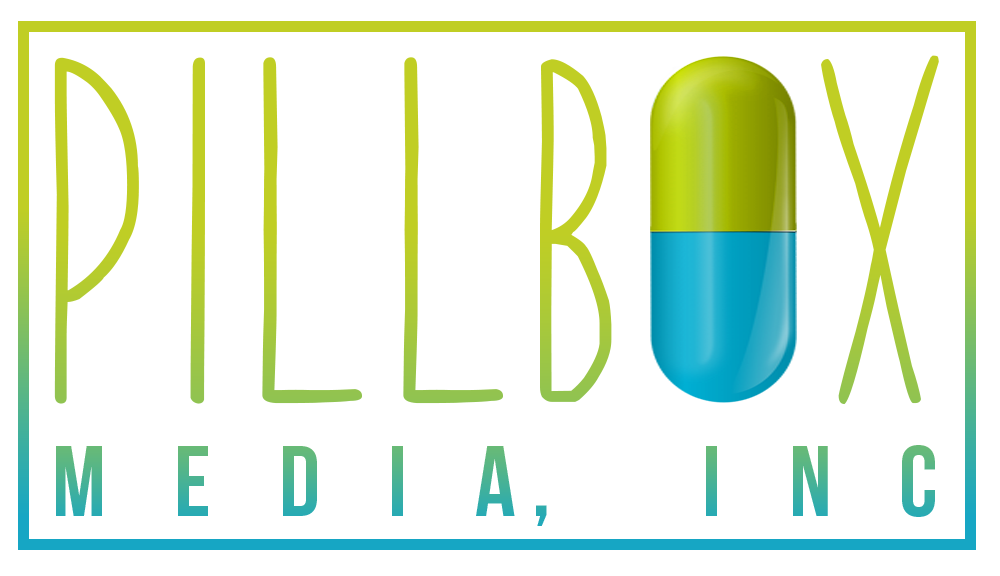
<style>
.page{position:relative;width:1000px;height:576px;background:#ffffff}
.page>*{position:absolute;margin:0}
.t1{font:500px "PaperDaisy";color:#c0ce24}
.t2{font:100px "BebasNeue";letter-spacing:0.68em}
</style>
<div class="page">
<p class="t1" style="left:54px;top:55px;width:885px;height:350px">PILLBOX</p>
<p class="t2" style="left:56px;top:445px;width:879px;height:81px">MEDIA, INc</p>
</div>
